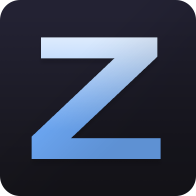
<style>
.page{position:relative;width:196px;height:196px}
.page>*{position:absolute;margin:0}
.t1{font:169.5px "Arial-BoldMT";scale:1.31 1}
</style>
<div class="page">
<p class="t1" style="left:31px;top:37px;width:130px;height:122px">Z</p>
</div>
